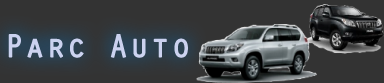
<style>
.page{position:relative;width:384px;height:83px;background:#333333}
.page>*{position:absolute;margin:0}
.t1{font:33.3px "OratorStd";color:#cbd2ef;font-weight:bold}
</style>
<div class="page">
<p class="t1" style="left:8px;top:34px;width:180px;height:24px">Parc Auto</p>
</div>
